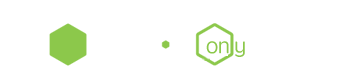
<style>
.page{position:relative;width:350px;height:66px;background:#ffffff}
.page>*{position:absolute;margin:0}
.t1{font:22px "STYuanti-SC-Regular";color:#8cc84b}
</style>
<div class="page">
<p class="t1" style="left:206px;top:36px;width:39px;height:21px">only</p>
</div>
